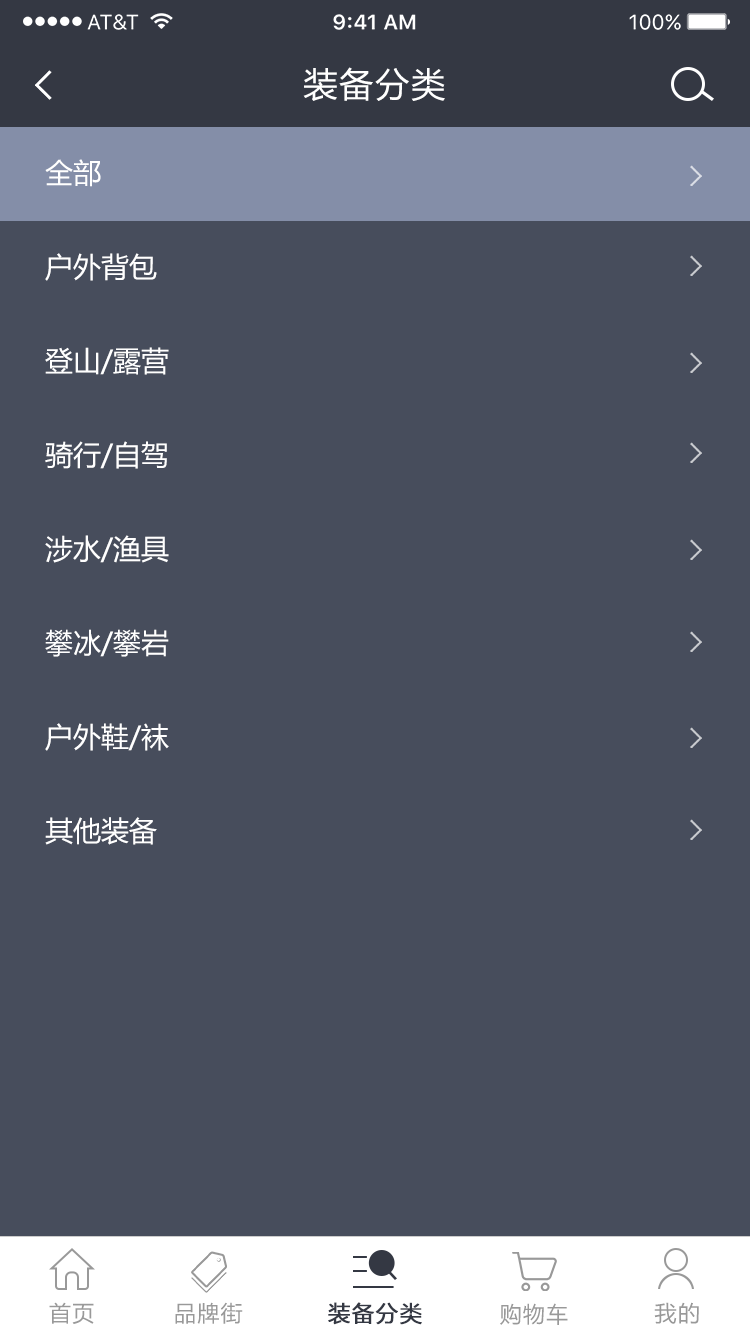
<style>
.page{position:relative;width:750px;height:1334px;background:#474d5c}
.page>*{position:absolute;margin:0}
.t1{font:34px "MicrosoftYaHei";letter-spacing:0.06em;color:#ffffff}
.t2{font:28px/47px "MicrosoftYaHei";color:#ffffff}
.t3{font:22px "MicrosoftYaHei";letter-spacing:0.06em;color:#999999}
.t4{font:22px "MicrosoftYaHei";letter-spacing:0.06em;color:#343843;font-weight:bold}
</style>
<div class="page">
<p class="t1" style="left:303px;top:67px;width:142px;height:34px">装备分类</p>
<p class="t2" style="left:45px;top:159px;width:124px;height:686px">全部<br><br>户外背包<br><br>登山/露营<br><br>骑行/自驾<br><br>涉水/渔具<br><br>攀冰/攀岩<br><br>户外鞋/袜<br><br>其他装备</p>
<p class="t3" style="left:49px;top:1302px;width:45px;height:22px">首页</p>
<p class="t3" style="left:175px;top:1302px;width:68px;height:22px">品牌街</p>
<p class="t4" style="left:328px;top:1302px;width:94px;height:23px">装备分类</p>
<p class="t3" style="left:654px;top:1302px;width:45px;height:22px">我的</p>
<p class="t3" style="left:500px;top:1303px;width:68px;height:22px">购物车</p>
</div>
